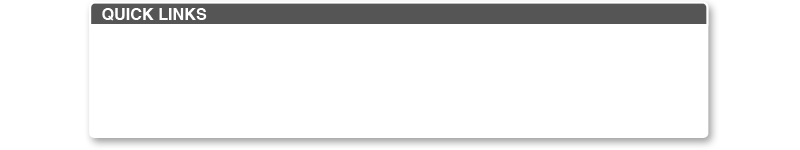
<style>
.page{position:relative;width:800px;height:150px;background:#ffffff}
.page>*{position:absolute;margin:0}
.t1{font:16.2px "Helvetica-Bold";color:#ffffff}
</style>
<div class="page">
<p class="t1" style="left:102px;top:8px;width:105px;height:13px">QUICK LINKS</p>
</div>
